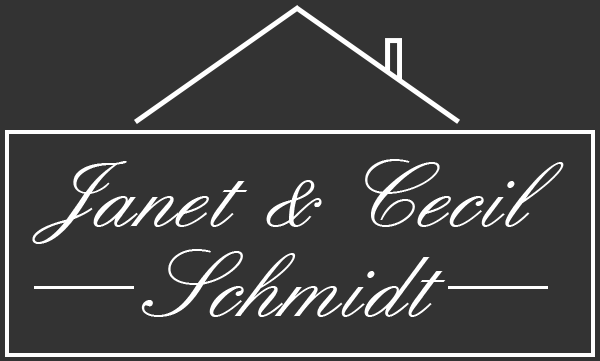
<style>
.page{position:relative;width:600px;height:361px;background:#333333}
.page>*{position:absolute;margin:0}
.t1{font:100px/90px "English157BT-Regular";color:#ffffff}
</style>
<div class="page">
<p class="t1" style="left:32px;top:159px;width:532px;height:158px;text-align:center">Janet &amp; Cecil<br>Schmidt</p>
</div>
